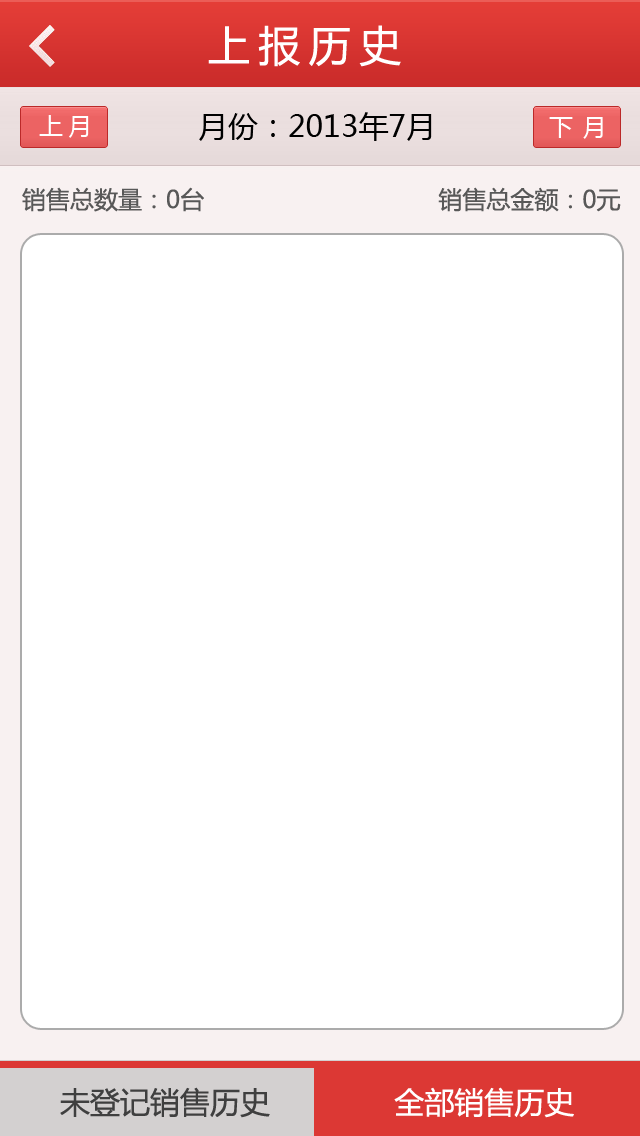
<style>
.page{position:relative;width:640px;height:1136px;background:#ffffff}
.page>*{position:absolute;margin:0}
.t1{font:42px "MicrosoftYaHei";letter-spacing:0.2em;color:#ffffff}
.t2{font:30px "MicrosoftYaHei";color:#000000}
.t3{font:24px "MicrosoftYaHei";letter-spacing:0.2em;color:#ffffff}
.t4{font:24px "MicrosoftYaHei";letter-spacing:0.05em;color:#ffffff}
.t5{font:24px "MicrosoftYaHei";color:#585858}
.t6{font:30px "MicrosoftYaHei";color:#3f3f3f}
.t7{font:30px "MicrosoftYaHei";color:#ffffff}
</style>
<div class="page">
<p class="t1" style="left:208px;top:25px;width:193px;height:42px">上报历史</p>
<p class="t2" style="left:199px;top:112px;width:233px;height:29px">月份：2013年7月</p>
<p class="t3" style="left:39px;top:115px;width:50px;height:23px">上月</p>
<p class="t4" style="left:549px;top:117px;width:54px;height:22px">下 月</p>
<p class="t5" style="left:22px;top:187px;width:599px;height:25px">销售总数量：0台                                 销售总金额：0元</p>
<p class="t6" style="left:60px;top:1087px;width:514px;height:31px">未登记销售历史              <span class="t7">全部销售历史</span></p>
</div>
